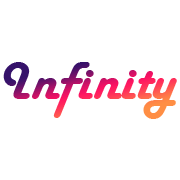
<style>
.page{position:relative;width:180px;height:180px;background:#ffffff}
.page>*{position:absolute;margin:0}
.t1{font:55.8px "HarlowSolid"}
</style>
<div class="page">
<p class="t1" style="left:3px;top:62px;width:174px;height:57px">Infinity</p>
</div>
